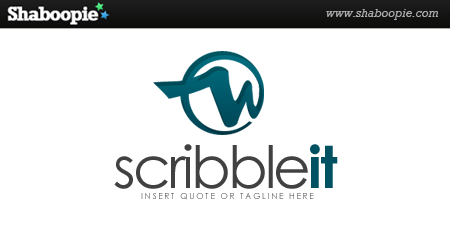
<style>
.page{position:relative;width:450px;height:250px;background:#ffffff}
.page>*{position:absolute;margin:0}
.t1{font:58.3px "CenturyGothic";letter-spacing:-0.05em;color:#414141}
.t2{font:58.3px "CenturyGothic-Bold";letter-spacing:-0.05em;color:#005263}
.t3{font:8.3px "CenturyGothic";letter-spacing:0.2em}
</style>
<div class="page">
<p class="t1" style="left:114px;top:144px;width:224px;height:45px">scribble<span class="t2">it</span></p>
<p class="t3" style="left:141px;top:193px;width:173px;height:7px">INSERT QUOTE OR TAGLINE HERE</p>
</div>
